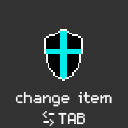
<style>
.page{position:relative;width:128px;height:128px;background:#333333}
.page>*{position:absolute;margin:0}
.t1{font:25px/20.8px "m5x7";color:#ffffff}
.t2{font:20.8px/8.3px "TimesNewRomanPSMT";color:#ffffff}
.t3{font:20.8px/8.3px "m5x7";color:#ffffff}
</style>
<div class="page">
<p class="t1" style="left:15px;top:91px;width:97px;height:34px;text-align:center">change item<br>  TAB</p>
<p class="t2" style="left:42px;top:111px;width:13px;height:15px;text-align:center"><span class="t3">&lt;</span>-<br> -<span class="t3">&gt;</span></p>
</div>
